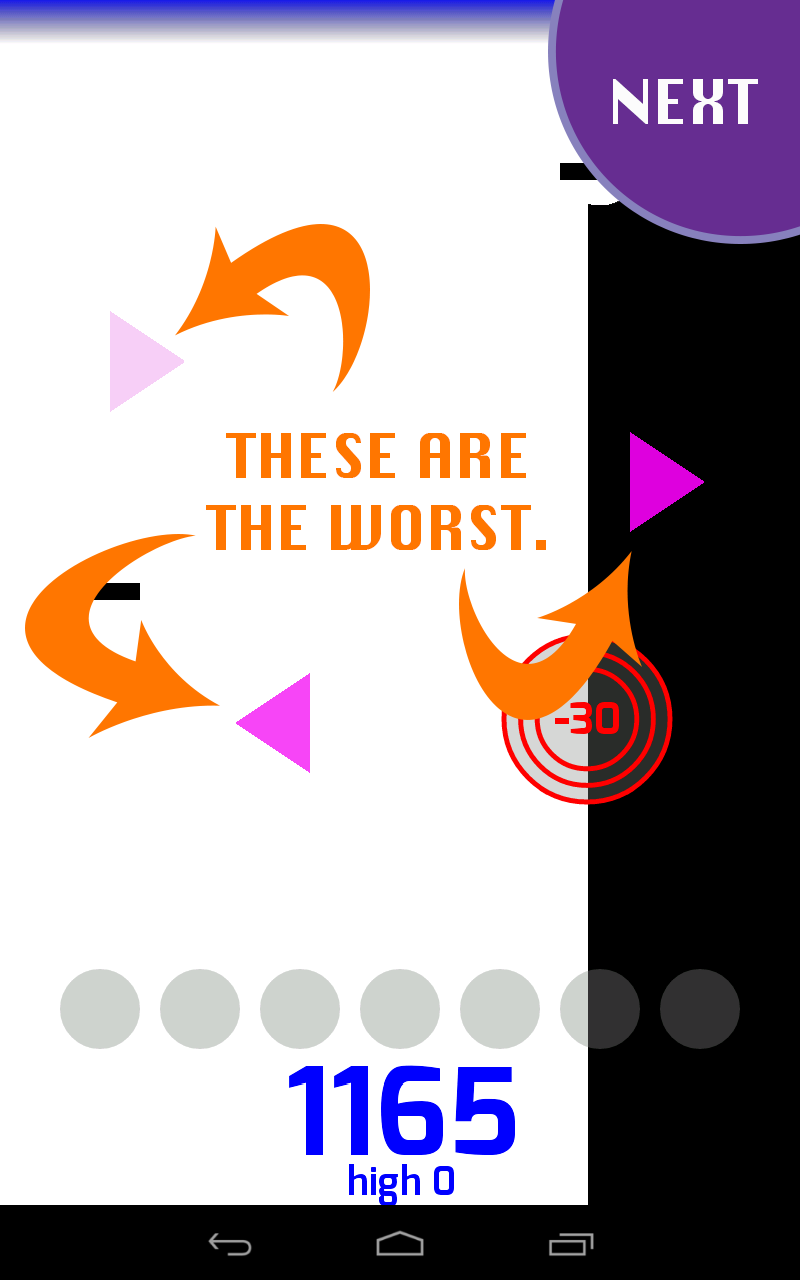
<style>
.page{position:relative;width:800px;height:1280px;background:#ffffff}
.page>*{position:absolute;margin:0}
.t1{font:60px "Silom";color:#fcfcfc}
.t2{font:60px "Silom";color:#ff7600}
</style>
<div class="page">
<p class="t1" style="left:613px;top:79px;width:145px;height:45px">NEXT</p>
<p class="t2" style="left:206px;top:433px;width:340px;height:117px;text-align:center">THESE ARE<br>THE WORST.</p>
</div>
